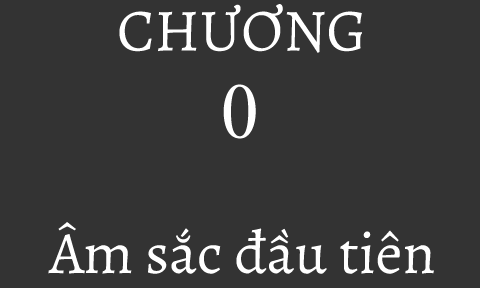
<style>
.page{position:relative;width:480px;height:288px;background:#333333}
.page>*{position:absolute;margin:0}
.t1{font:60px "Alegreya-Regular";color:#ffffff}
</style>
<div class="page">
<p class="t1" style="left:119px;top:4px;width:243px;height:49px">CHƯƠNG</p>
<p class="t1" style="left:48px;top:222px;width:386px;height:52px">Âm sắc đầu tiên</p>
</div>
